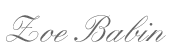
<style>
.page{position:relative;width:176px;height:47px;background:#ffffff}
.page>*{position:absolute;margin:0}
.t1{font:36px "HeatherScriptOne";color:#666666}
</style>
<div class="page">
<p class="t1" style="left:6px;top:15px;width:160px;height:27px">Zoe Babin</p>
</div>
